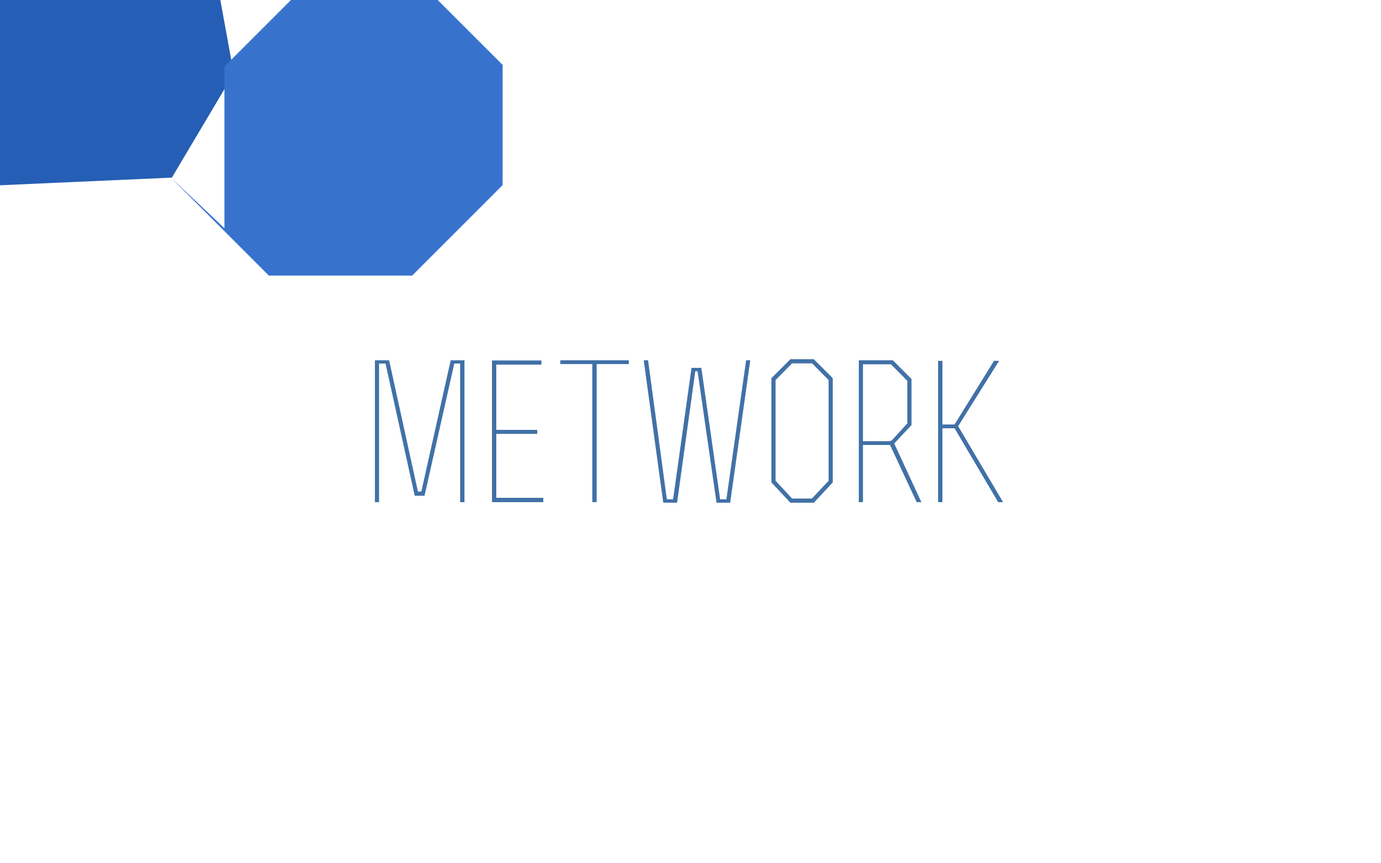
<style>
.page{position:relative;width:1381px;height:863px;background:#ffffff}
.page>*{position:absolute;margin:0}
.t1{font:189.5px "RexLight";color:#4171a7}
</style>
<div class="page">
<p class="t1" style="left:375px;top:359px;width:629px;height:144px">metwork</p>
</div>
